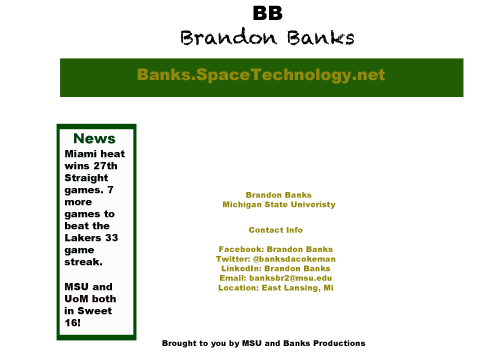
<style>
.page{position:relative;width:504px;height:360px;background:#ffffff}
.page>*{position:absolute;margin:0}
.t1{font:20px "Chalkduster";color:#000000}
.t2{font:20px "Arial-Black";color:#000000}
.t3{font:16px "Arial-Black";color:#93880c}
.t4{font:14px "Arial-Black";color:#033f11}
.t5{font:10px "Arial-Black";color:#010702}
.t6{font:8px "Arial-Black";color:#93880c}
.t7{font:10px "Arial-Black";color:#080101}
.t8{font:8px "Arial-Black";color:#010702}
</style>
<div class="page">
<p class="t1" style="left:181px;top:5px;width:173px;height:41px;text-align:center"><span class="t2">BB<br></span>Brandon Banks</p>
<p class="t3" style="left:137px;top:68px;width:248px;height:16px">Banks.SpaceTechnology.net</p>
<p class="t4" style="left:74px;top:133px;width:42px;height:11px">News</p>
<p class="t5" style="left:64px;top:150px;width:61px;height:116px">Miami heat wins 27th Straight games. 7 more games to beat the Lakers 33 game streak.</p>
<p class="t6" style="left:223px;top:192px;width:113px;height:17px;text-align:center">Brandon Banks<br>Michigan State Univeristy</p>
<p class="t6" style="left:216px;top:227px;width:120px;height:65px;text-align:center">Contact Info<br><br>Facebook: Brandon Banks<br>Twitter: @banksdacokeman<br>LinkedIn: Brandon Banks<br>Email: banksbr2@msu.edu<br>Location: East Lansing, Mi</p>
<p class="t7" style="left:64px;top:283px;width:52px;height:44px">MSU and UoM both in Sweet 16!</p>
<p class="t8" style="left:162px;top:340px;width:204px;height:8px">Brought to you by MSU and Banks Productions</p>
</div>
